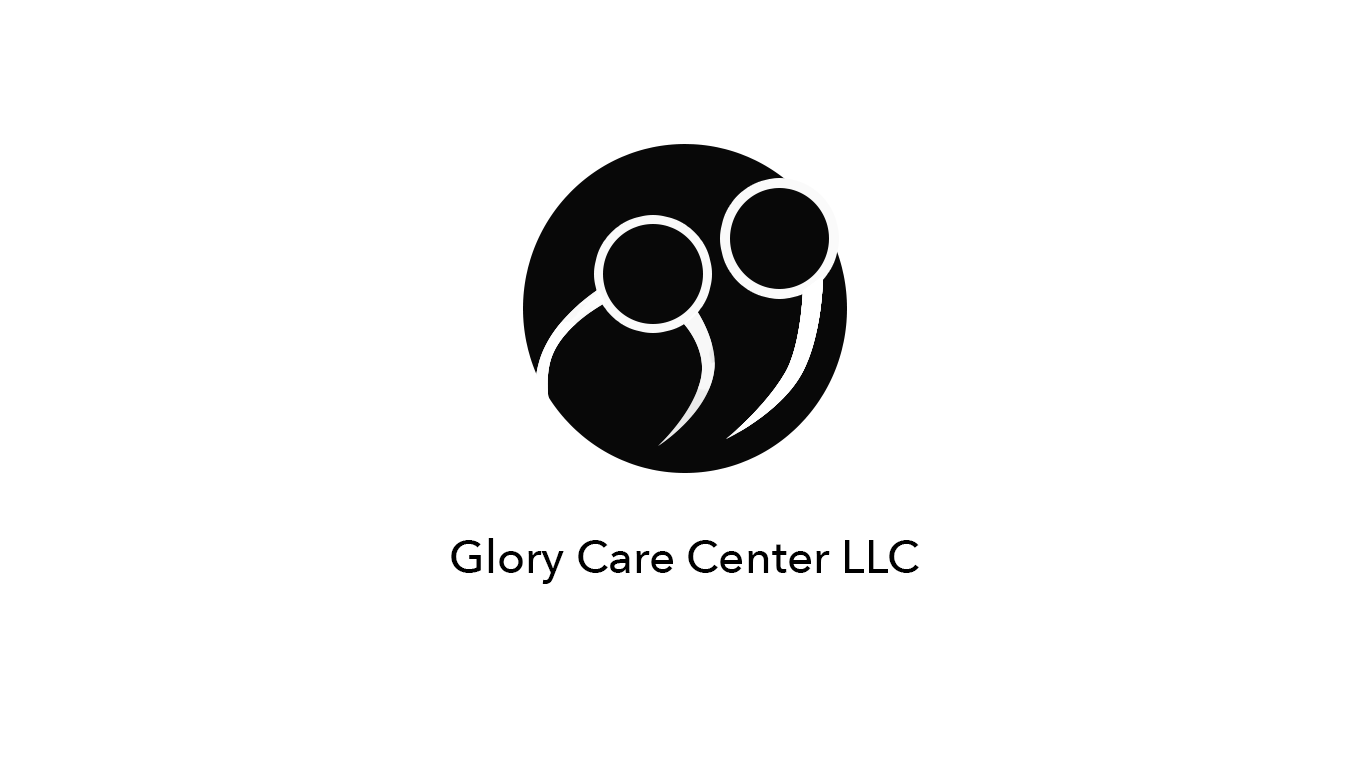
<style>
.page{position:relative;width:1366px;height:768px;background:#ffffff}
.page>*{position:absolute;margin:0}
.t1{font:46px "AvenirNext-Medium";color:#000000}
</style>
<div class="page">
<p class="t1" style="left:451px;top:538px;width:468px;height:46px">Glory Care Center LLC</p>
</div>
